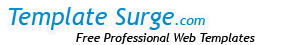
<style>
.page{position:relative;width:302px;height:45px;background:#ffffff}
.page>*{position:absolute;margin:0}
.t1{font:24px "TrebuchetMS-Italic";color:#008aca}
.t2{font:14px "TrebuchetMS-Italic";color:#008aca}
.t3{font:12px "TrebuchetMS-Italic";color:#000000}
</style>
<div class="page">
<p class="t1" style="left:8px;top:7px;width:197px;height:23px">Template Surge<span class="t2">.com</span></p>
<p class="t3" style="left:76px;top:33px;width:179px;height:11px">Free Professional Web Templates</p>
</div>
